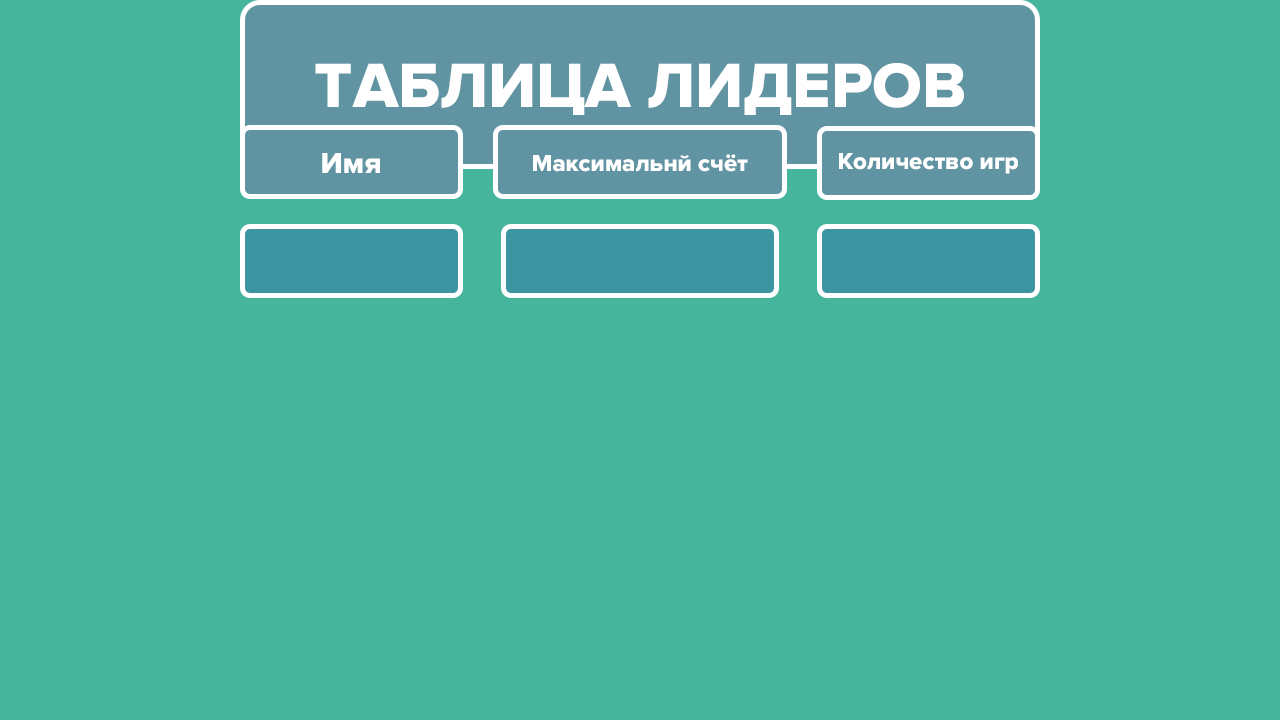
<style>
.page{position:relative;width:1280px;height:720px;background:#45b69c}
.page>*{position:absolute;margin:0}
.t1{font:65px "ProximaNova-Extrabld";color:#ffffff}
.t2{font:30px "ProximaNova-Extrabld";color:#ffffff}
.t3{font:24px "ProximaNova-Extrabld";color:#ffffff}
</style>
<div class="page">
<p class="t1" style="left:315px;top:63px;width:649px;height:52px">ТАБЛИЦА ЛИДЕРОВ</p>
<p class="t2" style="left:322px;top:153px;width:58px;height:20px">Имя</p>
<p class="t3" style="left:533px;top:154px;width:215px;height:18px">Максимальнй счёт</p>
<p class="t3" style="left:839px;top:153px;width:179px;height:21px">Количество игр</p>
</div>
